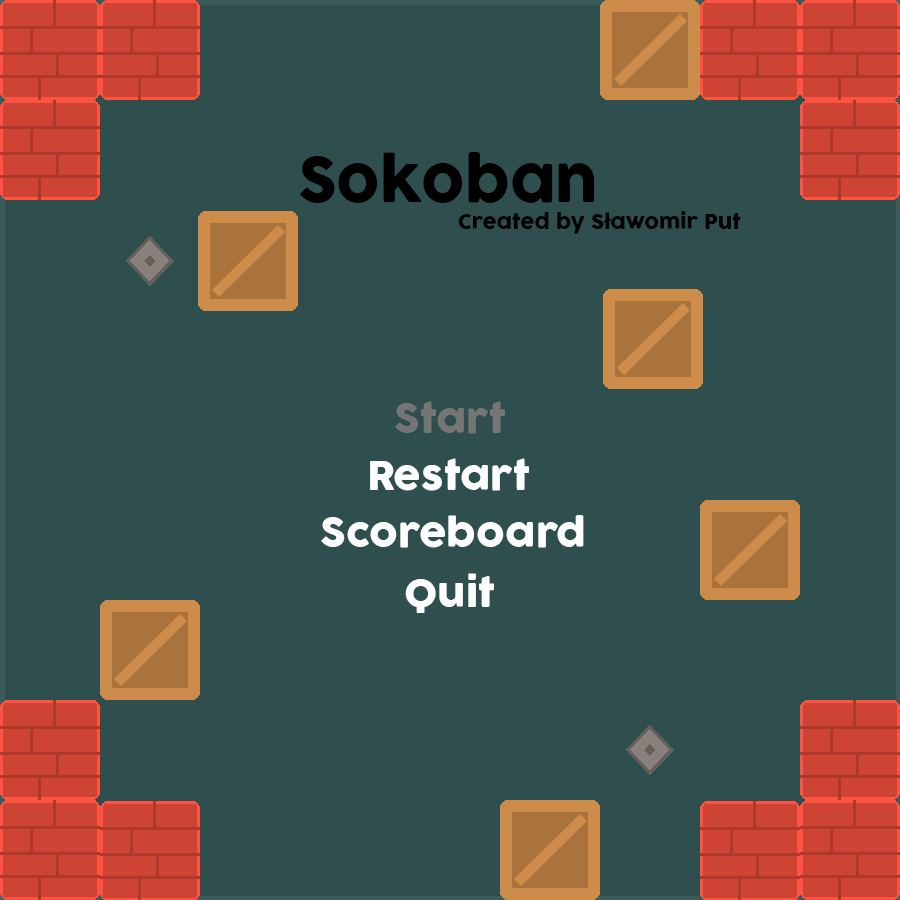
<style>
.page{position:relative;width:900px;height:900px;background:#2f4f4f}
.page>*{position:absolute;margin:0}
.t1{font:59.8px "COCOGOOSE";color:#000000}
.t2{font:19.9px "COCOGOOSE";color:#000000}
.t3{font:38.8px "COCOGOOSE";color:#757575}
.t4{font:38.8px "COCOGOOSE";color:#ffffff}
.t5{font:38.3px "COCOGOOSE";color:#ffffff}
</style>
<div class="page">
<p class="t1" style="left:300px;top:152px;width:295px;height:51px">Sokoban</p>
<p class="t2" style="left:458px;top:211px;width:283px;height:23px">Created by Sławomir Put</p>
<p class="t3" style="left:395px;top:401px;width:110px;height:33px">Start</p>
<p class="t4" style="left:370px;top:458px;width:159px;height:33px">Restart</p>
<p class="t4" style="left:321px;top:515px;width:263px;height:33px">Scoreboard</p>
<p class="t5" style="left:405px;top:573px;width:89px;height:40px">Quit</p>
</div>
